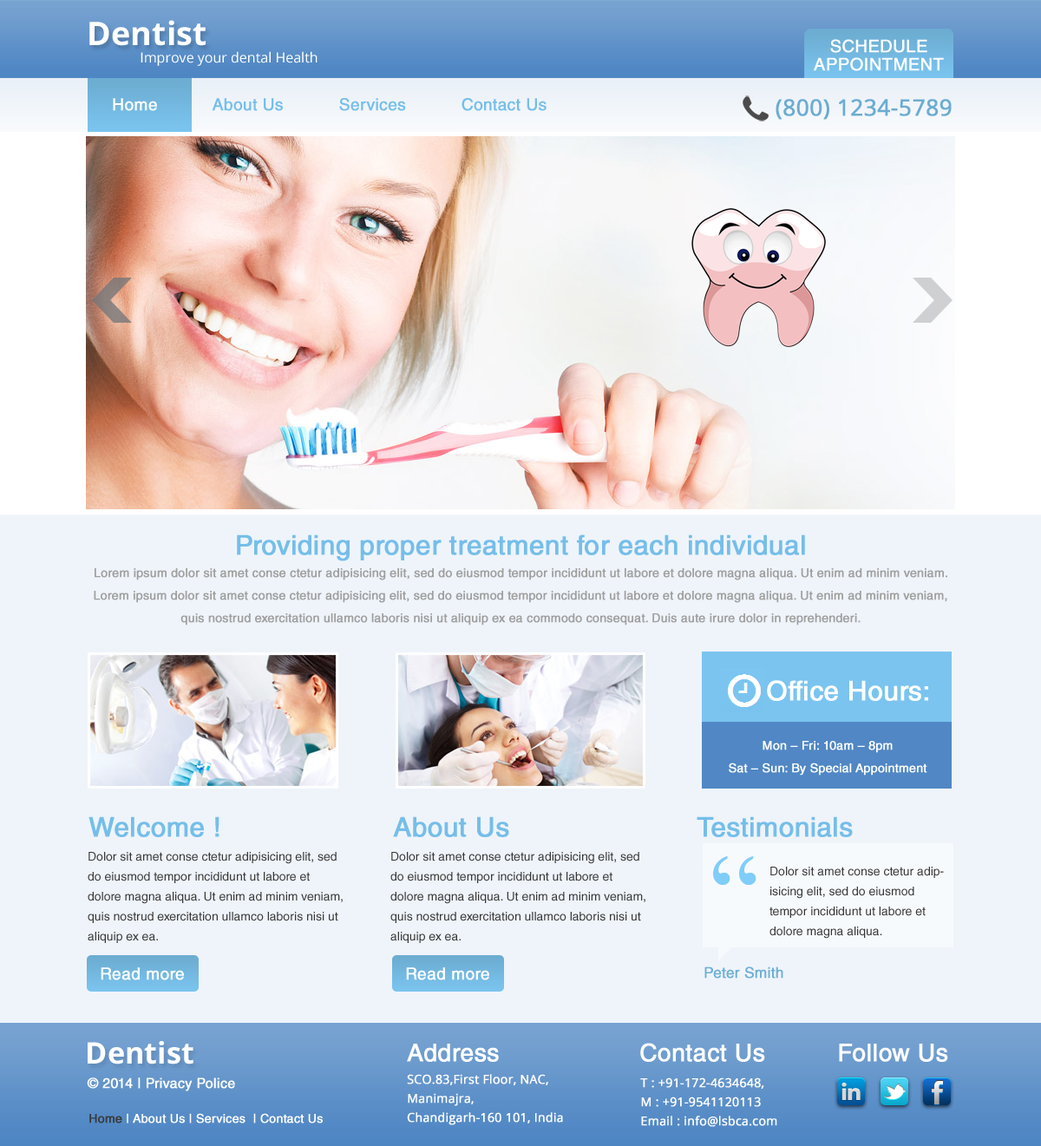
<style>
.page{position:relative;width:1041px;height:1146px;background:#eff4fa}
.page>*{position:absolute;margin:0}
.t1{font:32.6px "OpenSans-Bold";color:#ffffff}
.t2{font:17.3px/18.2px "HelveticaLTStd-Roman";color:#ffffff;font-weight:bold}
.t3{font:13.9px "OpenSans";color:#ffffff}
.t4{font:16.5px "HelveticaLTStd-Roman";color:#75beea;font-weight:bold}
.t5{font:16.5px "HelveticaLTStd-Roman";color:#ffffff;font-weight:bold}
.t6{font:22.6px "OpenSans";color:#6cacd1;font-weight:bold}
.t7{font:14.7px "OpenSans";color:#ffffff;font-weight:bold}
.t8{font:12.1px/22.6px "HelveticaLTStd-Roman";color:#9f9f9f;font-weight:bold}
.t9{font:26.9px/26.9px "HelveticaLTStd-Roman";color:#75beea;font-weight:bold}
.t10{font:26.9px "HelveticaLTStd-Roman";color:#ffffff;font-weight:bold}
.t11{font:12.1px/22.6px "HelveticaLTStd-Roman";color:#ffffff;font-weight:bold}
.t12{font:26.9px "HelveticaLTStd-Roman";color:#75beea;font-weight:bold}
.t13{font:12.1px/19.9px "HelveticaLTStd-Roman";color:#383838}
.t14{font:14.7px "HelveticaLTStd-Roman";color:#6eafd5;font-weight:bold}
.t15{font:29.7px "OpenSans-Bold";color:#ffffff}
.t16{font:24.3px "HelveticaLTStd-Roman";color:#ffffff;font-weight:bold}
.t17{font:12.1px/19.1px "OpenSans";color:#ffffff;font-weight:bold}
.t18{font:13.8px "HelveticaLTStd-Roman";color:#ffffff;font-weight:bold}
.t19{font:12.1px "HelveticaLTStd-Roman";color:#ffffff;font-weight:bold}
.t20{font:12.1px "HelveticaLTStd-Roman";color:#383838;font-weight:bold}
</style>
<div class="page">
<p class="t1" style="left:89px;top:20px;width:117px;height:26px">Dentist</p>
<p class="t2" style="left:814px;top:39px;width:130px;height:32px;text-align:center">SCHEDULE<br>APPOINTMENT</p>
<p class="t3" style="left:141px;top:51px;width:176px;height:15px">Improve your dental Health</p>
<p class="t4" style="left:113px;top:98px;width:433px;height:13px"><span class="t5">Home    </span>       About Us           Services           Contact Us</p>
<p class="t6" style="left:775px;top:99px;width:176px;height:21px"><span class="t7"><br></span>(800) 1234-5789</p>
<p class="t8" style="left:94px;top:534px;width:853px;height:91px;text-align:center"><span class="t9">Providing proper treatment for each individual<br></span>Lorem ipsum dolor sit amet conse ctetur adipisicing elit, sed do eiusmod tempor incididunt ut labore et dolore magna aliqua. Ut enim ad minim veniam.<br>Lorem ipsum dolor sit amet conse ctetur adipisicing elit, sed do eiusmod tempor incididunt ut labore et dolore magna aliqua. Ut enim ad minim veniam, quis nostrud exercitation ullamco laboris nisi ut aliquip ex ea commodo consequat. Duis aute irure dolor in reprehenderi.</p>
<p class="t10" style="left:767px;top:680px;width:161px;height:21px">Office Hours:</p>
<p class="t11" style="left:729px;top:741px;width:198px;height:34px;text-align:center">Mon – Fri: 10am – 8pm<br>Sat – Sun: By Special Appointment</p>
<p class="t12" style="left:88px;top:816px;width:131px;height:21px">Welcome !</p>
<p class="t12" style="left:393px;top:816px;width:116px;height:21px">About Us</p>
<p class="t12" style="left:696px;top:816px;width:157px;height:21px">Testimonials</p>
<p class="t13" style="left:88px;top:852px;width:255px;height:91px">Dolor sit amet conse ctetur adipisicing elit, sed do eiusmod tempor incididunt ut labore et dolore magna aliqua. Ut enim ad minim veniam, quis nostrud exercitation ullamco laboris nisi ut aliquip ex ea.</p>
<p class="t13" style="left:390px;top:852px;width:255px;height:91px">Dolor sit amet conse ctetur adipisicing elit, sed do eiusmod tempor incididunt ut labore et dolore magna aliqua. Ut enim ad minim veniam, quis nostrud exercitation ullamco laboris nisi ut aliquip ex ea.</p>
<p class="t13" style="left:769px;top:866px;width:175px;height:72px">Dolor sit amet conse ctetur adipisicing elit, sed do eiusmod tempor incididunt ut labore et dolore magna aliqua.</p>
<p class="t5" style="left:101px;top:967px;width:83px;height:13px">Read more</p>
<p class="t5" style="left:406px;top:967px;width:83px;height:13px">Read more</p>
<p class="t14" style="left:704px;top:966px;width:79px;height:12px">Peter Smith</p>
<p class="t15" style="left:88px;top:1041px;width:105px;height:23px">Dentist</p>
<p class="t16" style="left:407px;top:1043px;width:92px;height:19px">Address</p>
<p class="t16" style="left:640px;top:1043px;width:125px;height:19px">Contact Us</p>
<p class="t16" style="left:839px;top:1043px;width:109px;height:19px">Follow Us</p>
<p class="t17" style="left:407px;top:1074px;width:156px;height:51px">SCO.83,First Floor, NAC, Manimajra, <br>Chandigarh-160 101, India</p>
<p class="t18" style="left:87px;top:1077px;width:148px;height:14px">© 2014 | Privacy Police</p>
<p class="t17" style="left:640px;top:1077px;width:137px;height:50px">T : +91-172-4634648, <br>M : +91-9541120113<br>Email : info@lsbca.com</p>
<p class="t19" style="left:89px;top:1113px;width:234px;height:10px"><span class="t20">Home</span> | About Us | Services  | Contact Us</p>
</div>
